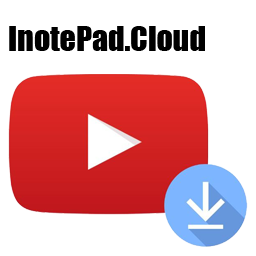
<style>
.page{position:relative;width:256px;height:256px;background:#ffffff}
.page>*{position:absolute;margin:0}
.t1{font:31.8px "Impact";color:#000000}
</style>
<div class="page">
<p class="t1" style="left:9px;top:26px;width:196px;height:25px">InotePad.Cloud</p>
</div>
